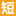
<style>
.page{position:relative;width:16px;height:16px;background:#f7a21f}
.page>*{position:absolute;margin:0}
.t1{font:13.3px "MicrosoftYaHei-Bold";color:#fdfdfd}
</style>
<div class="page">
<p class="t1" style="left:1px;top:1px;width:14px;height:14px">短</p>
</div>
